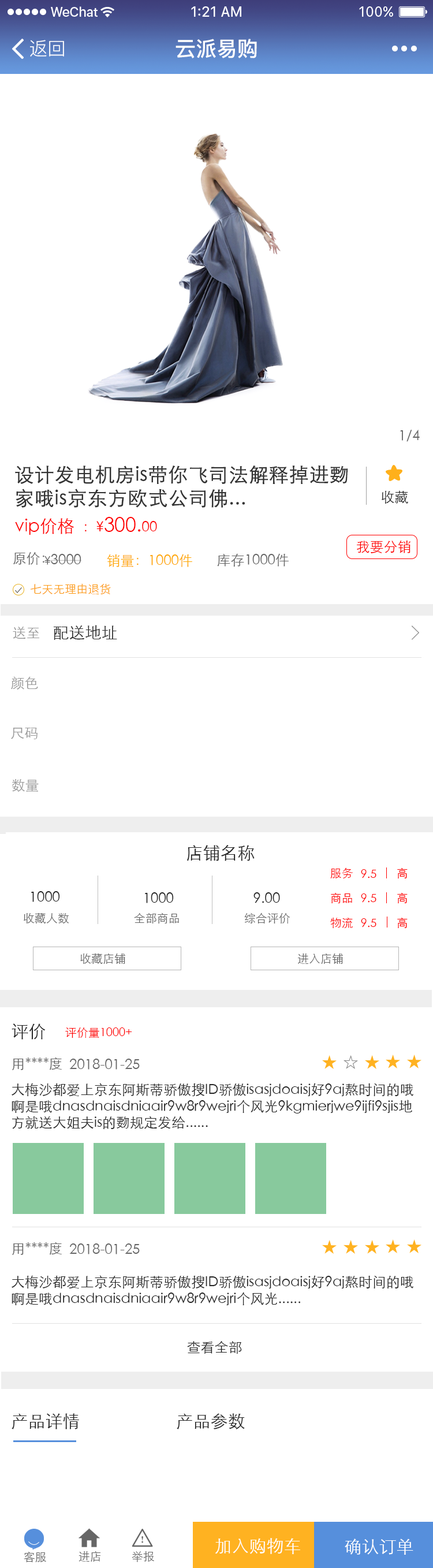
<style>
.page{position:relative;width:433px;height:1568px;background:#ffffff}
.page>*{position:absolute;margin:0}
.t1{font:18.5px "PingFang-SC-Regular";color:#ffffff}
.t2{font:20.8px "PingFang-SC-Bold";color:#ffffff}
.t3{font:13.9px "STXihei";color:#666666}
.t4{font:19.6px "STXihei";color:#333333;font-weight:bold}
.t5{font:13.9px "STXihei";color:#262626}
.t6{font:17.3px "STXihei";color:#ff0000}
.t7{font:13.9px "STXihei";color:#ff0000}
.t8{font:19.6px "STXihei";color:#ff0000}
.t9{font:11.6px "STXihei";color:#666666}
.t10{font:13.9px "STXihei";color:#ffa800}
.t11{font:11.6px "STXihei";color:#fc9a13}
.t12{font:13.9px "STXihei";color:#999999}
.t13{font:16.2px "STXihei";color:#333333}
.t14{font:17.3px "STXihei";color:#262626}
.t15{font:11.6px "STXihei";color:#ff0000}
.t16{font:17.3px "STXihei";color:#ffffff}
</style>
<div class="page">
<p class="t1" style="left:30px;top:40px;width:34px;height:17px">返回</p>
<p class="t2" style="left:176px;top:39px;width:81px;height:19px">云派易购</p>
<p class="t3" style="left:400px;top:430px;width:20px;height:12px">1/4</p>
<p class="t4" style="left:15px;top:465px;width:333px;height:43px">设计发电机房is带你飞司法解释掉进覅家哦is京东方欧式公司佛...</p>
<p class="t5" style="left:382px;top:490px;width:26px;height:14px">收藏</p>
<p class="t6" style="left:15px;top:517px;width:142px;height:18px">vip价格 <span class="t7"> ：¥</span><span class="t8">300.</span><span class="t7">00</span></p>
<p class="t7" style="left:357px;top:541px;width:54px;height:12px">我要分销</p>
<p class="t3" style="left:13px;top:552px;width:31px;height:13px">原价：</p>
<p class="t3" style="left:44px;top:554px;width:37px;height:11px"><span class="t9">¥</span>3000</p>
<p class="t10" style="left:107px;top:554px;width:85px;height:13px">销量：1000件</p>
<p class="t3" style="left:217px;top:553px;width:72px;height:14px">库存1000件</p>
<p class="t11" style="left:31px;top:583px;width:80px;height:12px">七天无理由退货</p>
<p class="t12" style="left:13px;top:627px;width:27px;height:12px">送至</p>
<p class="t13" style="left:53px;top:625px;width:64px;height:15px">配送地址</p>
<p class="t12" style="left:11px;top:676px;width:27px;height:14px">颜色</p>
<p class="t12" style="left:11px;top:728px;width:27px;height:11px">尺码</p>
<p class="t12" style="left:12px;top:779px;width:27px;height:13px">数量</p>
<p class="t14" style="left:187px;top:845px;width:68px;height:16px">店铺名称</p>
<p class="t15" style="left:330px;top:867px;width:23px;height:11px">服务</p>
<p class="t15" style="left:361px;top:869px;width:16px;height:9px">9.5</p>
<p class="t15" style="left:397px;top:868px;width:11px;height:10px">高</p>
<p class="t5" style="left:31px;top:891px;width:29px;height:11px">1000</p>
<p class="t5" style="left:145px;top:892px;width:29px;height:11px">1000</p>
<p class="t5" style="left:254px;top:892px;width:26px;height:11px">9.00</p>
<p class="t15" style="left:331px;top:892px;width:21px;height:11px">商品</p>
<p class="t15" style="left:361px;top:893px;width:16px;height:10px">9.5</p>
<p class="t15" style="left:397px;top:893px;width:11px;height:10px">高</p>
<p class="t9" style="left:24px;top:913px;width:45px;height:11px">收藏人数</p>
<p class="t9" style="left:134px;top:913px;width:45px;height:10px">全部商品</p>
<p class="t9" style="left:244px;top:913px;width:46px;height:11px">综合评价</p>
<p class="t15" style="left:330px;top:917px;width:23px;height:11px">物流</p>
<p class="t15" style="left:397px;top:918px;width:11px;height:10px">高</p>
<p class="t15" style="left:361px;top:918px;width:16px;height:10px">9.5</p>
<p class="t9" style="left:80px;top:953px;width:45px;height:11px">收藏店铺</p>
<p class="t9" style="left:298px;top:954px;width:45px;height:10px">进入店铺</p>
<p class="t14" style="left:12px;top:1023px;width:34px;height:17px">评价</p>
<p class="t15" style="left:65px;top:1027px;width:67px;height:11px">评价量1000+</p>
<p class="t3" style="left:12px;top:1057px;width:50px;height:13px">用****度</p>
<p class="t3" style="left:69px;top:1059px;width:71px;height:11px">2018-01-25</p>
<p class="t5" style="left:12px;top:1083px;width:402px;height:46px">大梅沙都爱上京东阿斯蒂骄傲搜ID骄傲isasjdoaisj好9aj熬时间的哦啊是哦dnasdnaisdniaair9w8r9wejri个风光9kgmierjwe9ijfi9sjis地方就送大姐夫is的覅规定发给......</p>
<p class="t3" style="left:12px;top:1242px;width:50px;height:13px">用****度</p>
<p class="t3" style="left:69px;top:1243px;width:71px;height:11px">2018-01-25</p>
<p class="t5" style="left:12px;top:1275px;width:402px;height:31px">大梅沙都爱上京东阿斯蒂骄傲搜ID骄傲isasjdoaisj好9aj熬时间的哦啊是哦dnasdnaisdniaair9w8r9wejri个风光......</p>
<p class="t5" style="left:187px;top:1341px;width:55px;height:13px">查看全部</p>
<p class="t14" style="left:12px;top:1413px;width:67px;height:16px">产品详情</p>
<p class="t14" style="left:177px;top:1413px;width:68px;height:16px">产品参数</p>
<p class="t16" style="left:215px;top:1538px;width:85px;height:16px">加入购物车</p>
<p class="t16" style="left:345px;top:1539px;width:69px;height:16px">确认订单</p>
<p class="t9" style="left:24px;top:1551px;width:22px;height:11px">客服</p>
<p class="t9" style="left:79px;top:1551px;width:22px;height:11px">进店</p>
<p class="t9" style="left:132px;top:1551px;width:22px;height:11px">举报</p>
</div>
